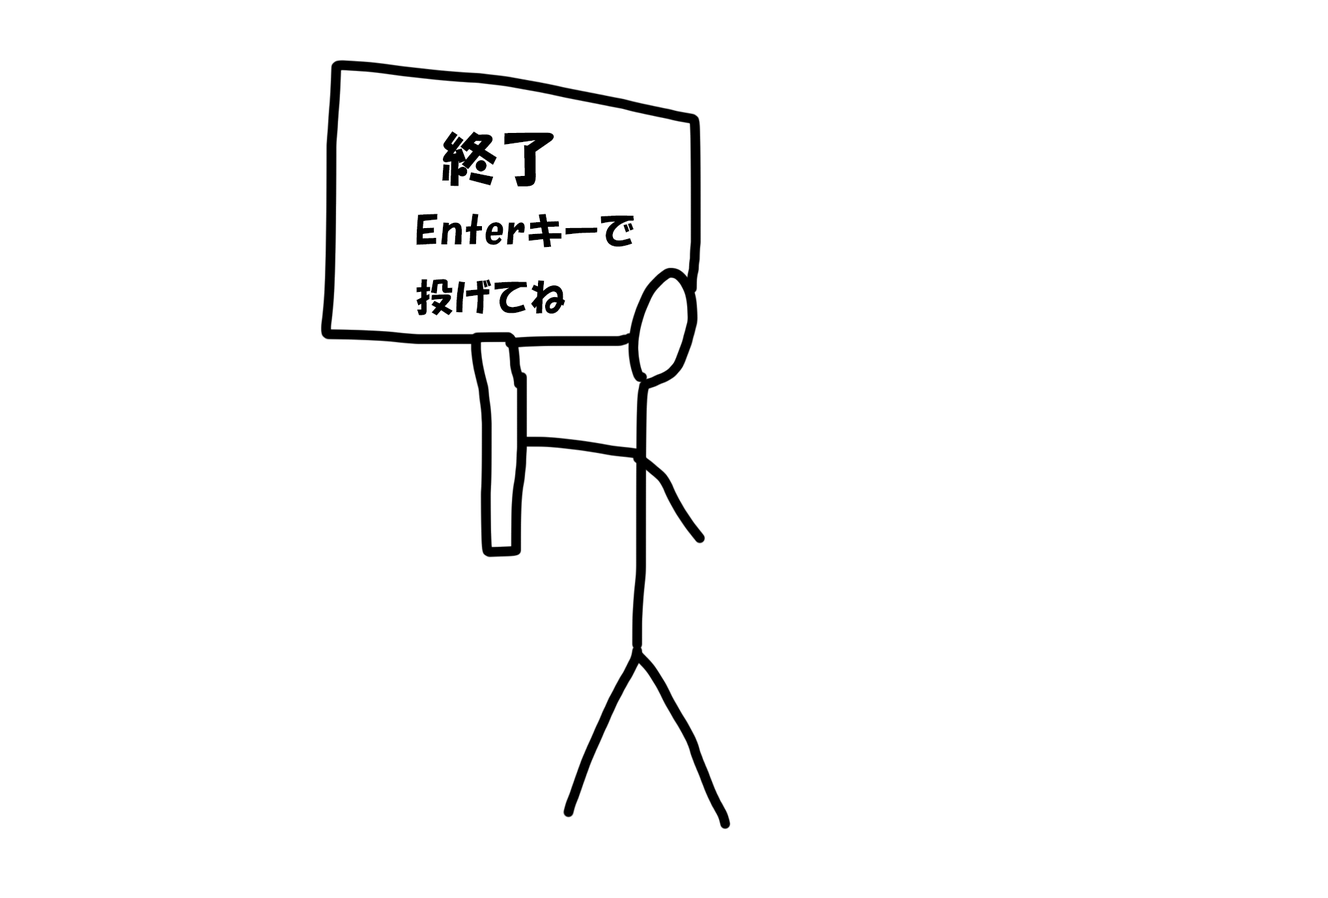
<style>
.page{position:relative;width:1328px;height:898px;background:#ffffff}
.page>*{position:absolute;margin:0}
.t1{font:57px "HGPSoeiKakupoptai";letter-spacing:0.05em;color:#000000}
.t2{font:38px "HGPSoeiKakupoptai";letter-spacing:0.05em;color:#000000}
</style>
<div class="page">
<p class="t1" style="left:442px;top:131px;width:112px;height:55px">終了</p>
<p class="t2" style="left:416px;top:214px;width:218px;height:101px;text-align:justify">Enterキーで<br>投げてね</p>
</div>
